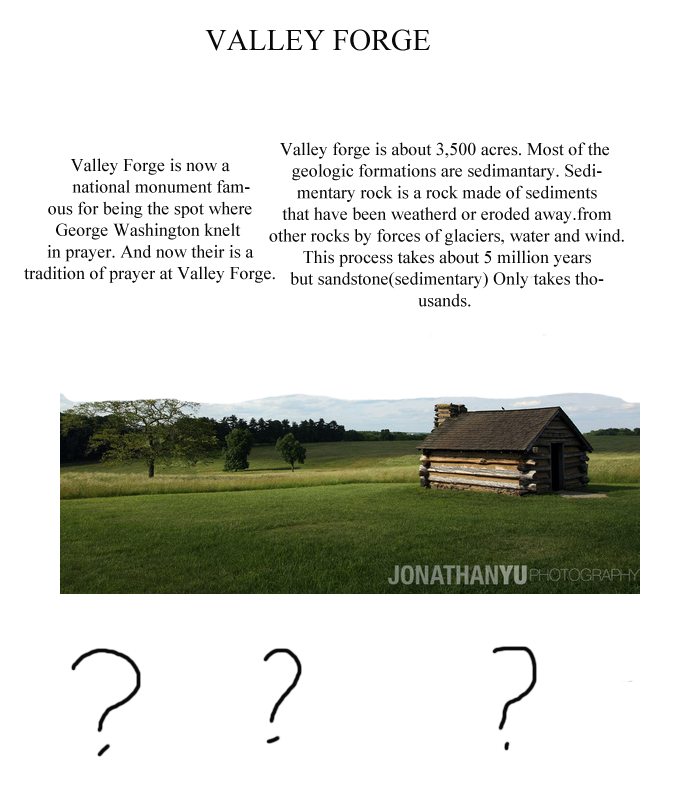
<style>
.page{position:relative;width:700px;height:800px;background:#ffffff}
.page>*{position:absolute;margin:0}
.t1{font:30px "IskoolaPota";color:#0a0909}
.t2{font:18px "IskoolaPota";color:#0a0909}
</style>
<div class="page">
<p class="t1" style="left:205px;top:29px;width:225px;height:22px">VALLEY FORGE</p>
<p class="t2" style="left:269px;top:142px;width:355px;height:165px;text-align:center">Valley forge is about 3,500 acres. Most of the <br>geologic formations are sedimantary. Sedi-<br>mentary rock is a rock made of sediments<br>that have been weatherd or eroded away.from<br>other rocks by forces of glaciers, water and wind.<br>This process takes about 5 million years<br>but sandstone(sedimentary) Only takes tho-<br>usands.</p>
<p class="t2" style="left:24px;top:158px;width:251px;height:125px;text-align:center">Valley Forge is now a<br>     national monument fam-<br>ous for being the spot where<br>George Washington knelt <br>in prayer. And now their is a<br>tradition of prayer at Valley Forge.</p>
</div>
